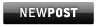
<style>
.page{position:relative;width:97px;height:27px;background:#ffffff}
.page>*{position:absolute;margin:0}
.t1{font:12px "BellGothicStd-Black";color:#ffffff}
.t2{font:12px "BellGothicStd-Bold";color:#ffffff}
</style>
<div class="page">
<p class="t1" style="left:20px;top:7px;width:58px;height:11px"><span class="t2">NEW</span>POST</p>
</div>
